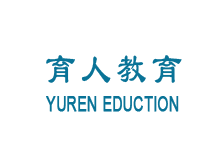
<style>
.page{position:relative;width:214px;height:154px;background:#ffffff}
.page>*{position:absolute;margin:0}
.t1{font:43.5px "LiSu";letter-spacing:0.23em;color:#097397;text-transform:uppercase;scale:0.69 1}
.t2{font:20.3px "ArialMT";letter-spacing:0.11em;color:#097397;text-transform:uppercase;font-weight:bold;scale:0.69 1}
</style>
<div class="page">
<p class="t1" style="left:46px;top:55px;width:136px;height:28px">育人教育</p>
<p class="t2" style="left:46px;top:96px;width:133px;height:16px">YUREN EDUCTION</p>
</div>
